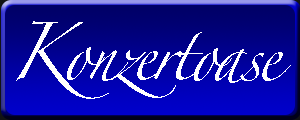
<style>
.page{position:relative;width:300px;height:120px}
.page>*{position:absolute;margin:0}
.t1{font:51.2px "Zapfino";letter-spacing:-0.08em;color:#ffffff;scale:0.88 1}
</style>
<div class="page">
<p class="t1" style="left:16px;top:21px;width:275px;height:78px">Konzertoase</p>
</div>
